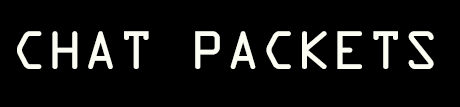
<style>
.page{position:relative;width:460px;height:107px;background:#000000}
.page>*{position:absolute;margin:0}
.t1{font:58.2px "OCRAExtended";color:#fbfdf3}
</style>
<div class="page">
<p class="t1" style="left:17px;top:31px;width:417px;height:38px">CHAT PACKETS</p>
</div>
